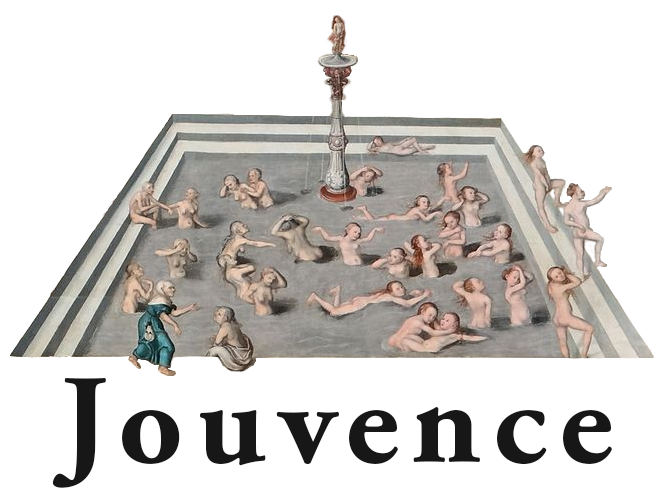
<style>
.page{position:relative;width:664px;height:504px;background:#ffffff}
.page>*{position:absolute;margin:0}
.t1{font:127px "AGaramondPro-Bold";letter-spacing:0.1em;color:#171717}
</style>
<div class="page">
<p class="t1" style="left:52px;top:378px;width:560px;height:110px">Jouvence</p>
</div>
